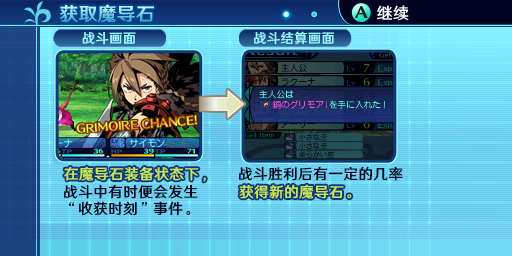
<style>
.page{position:relative;width:512px;height:256px}
.page>*{position:absolute;margin:0}
.t1{font:18.7px "HYWenHei-FEW";letter-spacing:0.025em}
.t2{font:16px "HYWenHei-FEW";letter-spacing:0.025em}
.t3{font:13.3px "HYWenHei-FEW";letter-spacing:0.025em;color:#94f7ff}
.t4{font:14.7px "HYWenHei-FEW";letter-spacing:0.025em;color:#c6e752}
.t5{font:14.7px "HYWenHei-FEW";letter-spacing:0.025em;color:#000421}
.t6{font:14.7px/16.7px "HYWenHei-FEW";letter-spacing:0.025em;color:#000421}
</style>
<div class="page">
<p class="t1" style="left:60px;top:4px;width:94px;height:19px">获取魔导石</p>
<p class="t2" style="left:376px;top:5px;width:32px;height:16px">继续</p>
<p class="t3" style="left:82px;top:32px;width:54px;height:13px">战斗画面</p>
<p class="t3" style="left:254px;top:31px;width:80px;height:14px">战斗结算画面</p>
<p class="t4" style="left:64px;top:166px;width:142px;height:16px">在魔导石装备状态下，</p>
<p class="t5" style="left:239px;top:166px;width:164px;height:15px">战斗胜利后有一定的几率</p>
<p class="t6" style="left:64px;top:185px;width:134px;height:31px">战斗中有时便会发生<br>“收获时刻”事件。</p>
<p class="t4" style="left:239px;top:184px;width:113px;height:15px">获得新的魔导石。</p>
</div>
